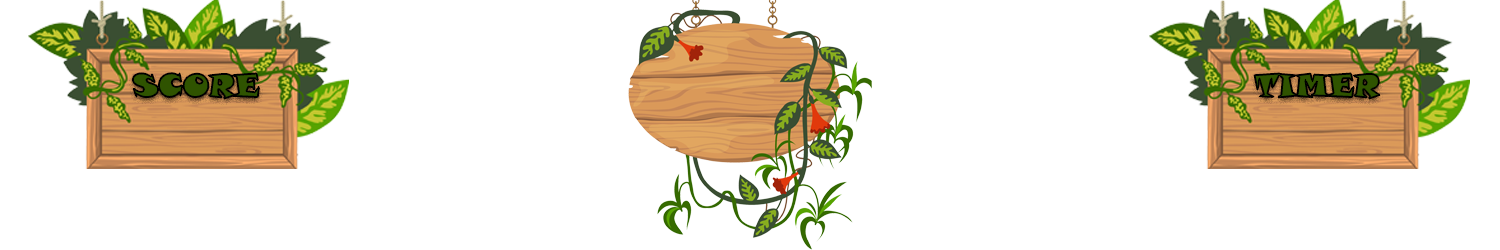
<style>
.page{position:relative;width:1500px;height:250px;background:#ffffff}
.page>*{position:absolute;margin:0}
.t1{font:31px "SnapITC-Regular";color:#2f5300}
</style>
<div class="page">
<p class="t1" style="left:133px;top:73px;width:126px;height:26px">SCORE:</p>
<p class="t1" style="left:1254px;top:73px;width:126px;height:26px">TIMER</p>
</div>
